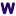
<style>
.page{position:relative;width:16px;height:16px;background:#ffffff}
.page>*{position:absolute;margin:0}
.t1{font:15px "ArialRoundedMTBold";color:#260266;font-weight:bold}
</style>
<div class="page">
<p class="t1" style="left:0px;top:2px;width:15px;height:13px">W</p>
</div>
